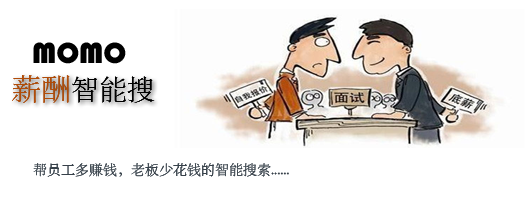
<style>
.page{position:relative;width:531px;height:198px;background:#ffffff}
.page>*{position:absolute;margin:0}
.t1{font:30px "STHupo";color:#000000}
.t2{font:28px "STSong";color:#000000}
.t3{font:30px "STSong";color:#b14c08}
.t4{font:14px "STSong";color:#37414a}
</style>
<div class="page">
<p class="t1" style="left:33px;top:42px;width:93px;height:22px">MOMO</p>
<p class="t2" style="left:12px;top:75px;width:143px;height:28px"><span class="t3">薪酬</span>智能搜</p>
<p class="t2" style="left:12px;top:75px;width:143px;height:28px"><span class="t3">薪酬</span>智能搜</p>
<p class="t4" style="left:33px;top:163px;width:256px;height:14px">帮员工多赚钱，老板少花钱的智能搜索......</p>
<p class="t4" style="left:33px;top:163px;width:256px;height:14px">帮员工多赚钱，老板少花钱的智能搜索......</p>
</div>
